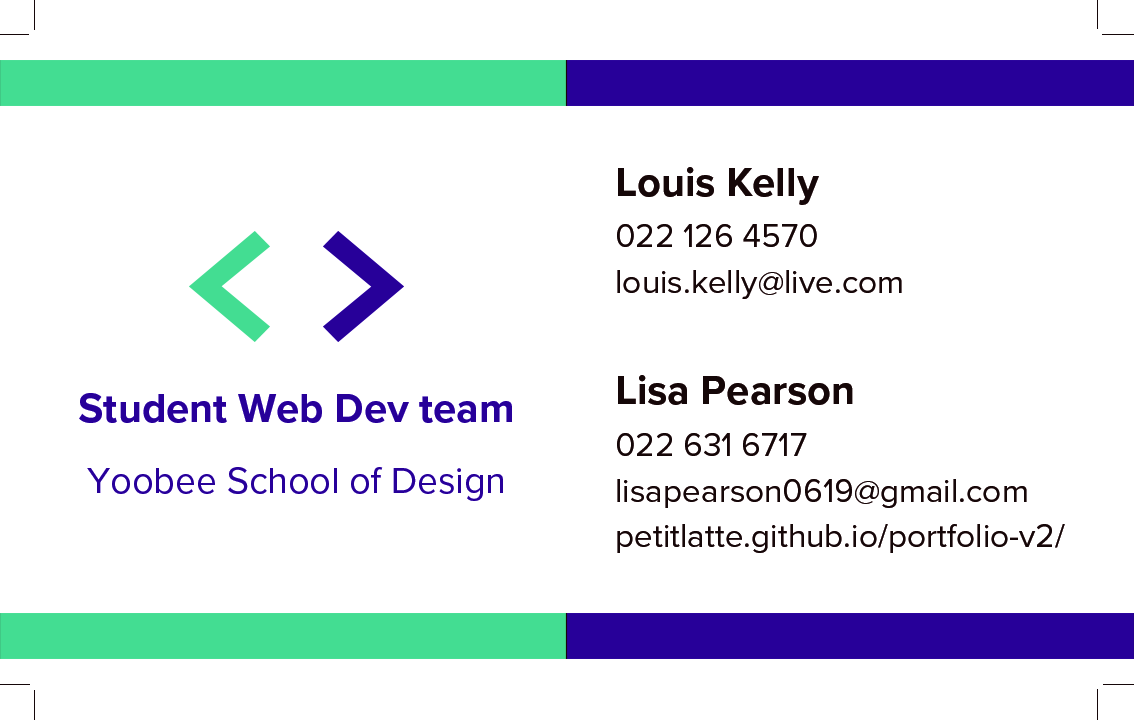
<style>
.page{position:relative;width:1134px;height:720px;background:#ffffff}
.page>*{position:absolute;margin:0}
.t1{font:33.3px/45.8px "ProximaNova-Regular";color:#150708}
.t2{font:41.7px/58.3px "ProximaNova-Bold";color:#150708}
.t3{font:200px "Consolas-Bold";letter-spacing:0.075em;color:#43dd92}
.t4{font:200px "Consolas-Bold";letter-spacing:0.075em;color:#270099}
.t5{font:37.5px/75px "ProximaNova-Regular";color:#270099}
.t6{font:41.7px/75px "ProximaNova-Bold";color:#270099}
</style>
<div class="page">
<p class="t1" style="left:617px;top:167px;width:448px;height:386px"><span class="t2">Louis Kelly <br></span>022 126 4570<br>louis.kelly@live.com<br><br><span class="t2">Lisa Pearson<br></span>022 631 6717 <br>lisapearson0619@gmail.com<br>petitlatte.github.io/portfolio-v2/</p>
<p class="t3" style="left:188px;top:231px;width:216px;height:111px">&lt;<span class="t4">&gt;</span></p>
<p class="t5" style="left:79px;top:393px;width:433px;height:108px;text-align:center"><span class="t6">Student Web Dev team<br></span>Yoobee School of Design</p>
</div>
